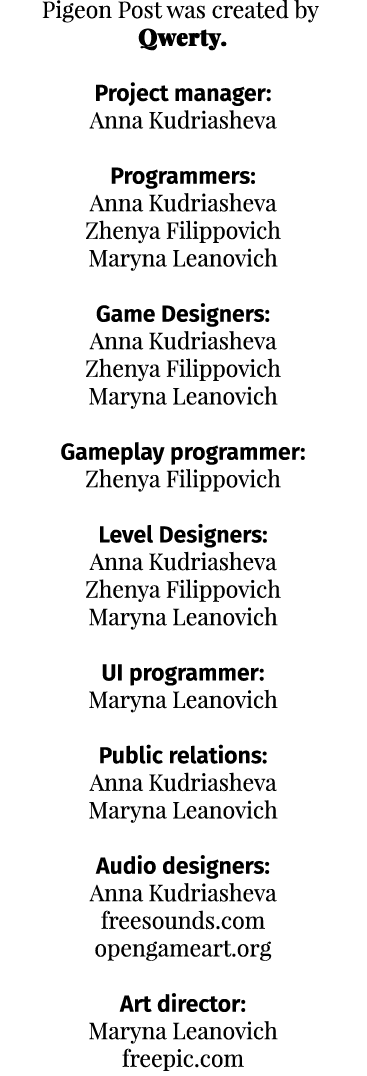
<style>
.page{position:relative;width:367px;height:1076px;background:#ffffff}
.page>*{position:absolute;margin:0}
.t1{font:23px "PlayfairDisplay-Regular";color:#000000}
.t2{font:23px "PlayfairDisplay-Black";color:#000000;font-weight:bold}
.t3{font:23px "FiraSans-SemiBold";color:#000000}
</style>
<div class="page">
<p class="t1" style="left:42px;top:0px;width:277px;height:1071px;text-align:center">Pigeon Post was created by <br><span class="t2">Qwerty.<br><br></span><span class="t3">Project manager:<br></span>Anna Kudriasheva<br><br><span class="t3">Programmers:<br></span>Anna Kudriasheva<br>Zhenya Filippovich<br>Maryna Leanovich<br><br><span class="t3">Game Designers:<br></span>Anna Kudriasheva<br>Zhenya Filippovich<br>Maryna Leanovich<br><br><span class="t3">Gameplay programmer:<br></span>Zhenya Filippovich<br><br><span class="t3">Level Designers:<br></span>Anna Kudriasheva<br>Zhenya Filippovich<br>Maryna Leanovich<br><br><span class="t3">UI programmer:<br></span>Maryna Leanovich<br><br><span class="t3">Public relations:<br></span>Anna Kudriasheva<br>Maryna Leanovich<br><br><span class="t3">Audio designers:<br></span>Anna Kudriasheva<br>freesounds.com<br>opengameart.org<br><br><span class="t3">Art director:<br></span>Maryna Leanovich<br>freepic.com</p>
</div>
